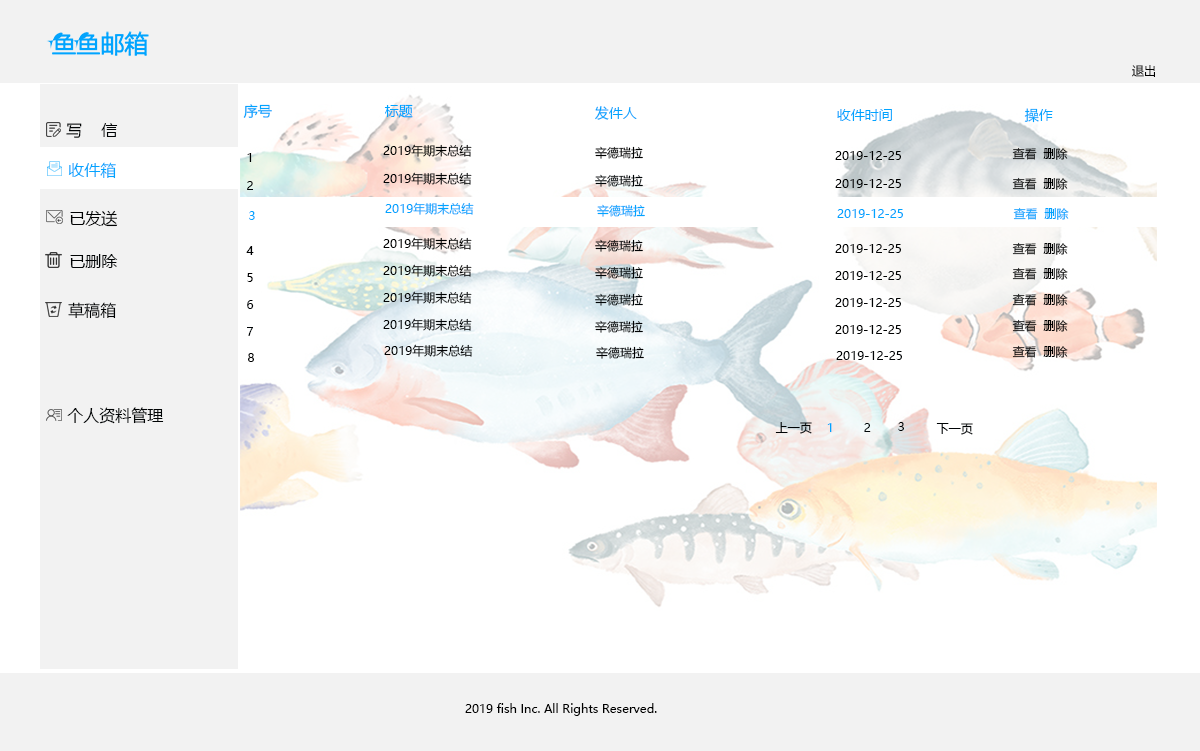
<style>
.page{position:relative;width:1200px;height:751px;background:#ffffff}
.page>*{position:absolute;margin:0}
.t1{font:12px "MicrosoftYaHei";color:#000000}
.t2{font:14px "MicrosoftYaHei";color:#00a4ff}
.t3{font:16px "MicrosoftYaHei";color:#000304}
.t4{font:12px "MicrosoftYaHei";color:#000101}
.t5{font:12px "MicrosoftYaHei";color:#000102}
.t6{font:16px "MicrosoftYaHei";color:#02a5ff}
.t7{font:12px "MicrosoftYaHei";color:#000203}
.t8{font:12px "MicrosoftYaHei";color:#000507}
.t9{font:12px "MicrosoftYaHei";color:#00a4ff}
.t10{font:16px "MicrosoftYaHei";color:#000102}
.t11{font:12px "MicrosoftYaHei";color:#000406}
.t12{font:16px "MicrosoftYaHei";color:#000203}
.t13{font:12px "MicrosoftYaHei";color:#000305}
.t14{font:12px "MicrosoftYaHei";color:#000304}
</style>
<div class="page">
<p class="t1" style="left:1132px;top:65px;width:23px;height:12px">退出</p>
<p class="t2" style="left:243px;top:104px;width:29px;height:14px">序号</p>
<p class="t2" style="left:384px;top:104px;width:29px;height:14px">标题</p>
<p class="t2" style="left:595px;top:106px;width:42px;height:14px">发件人</p>
<p class="t2" style="left:837px;top:109px;width:55px;height:12px">收件时间</p>
<p class="t2" style="left:1024px;top:108px;width:29px;height:15px">操作</p>
<p class="t3" style="left:66px;top:123px;width:52px;height:15px">写    信</p>
<p class="t4" style="left:383px;top:144px;width:89px;height:13px">2019年期末总结</p>
<p class="t4" style="left:595px;top:146px;width:48px;height:13px">辛德瑞拉</p>
<p class="t4" style="left:1012px;top:147px;width:56px;height:13px">查看  删除</p>
<p class="t5" style="left:247px;top:153px;width:5px;height:9px">1</p>
<p class="t4" style="left:835px;top:151px;width:66px;height:9px">2019-12-25</p>
<p class="t6" style="left:68px;top:162px;width:48px;height:17px">收件箱</p>
<p class="t7" style="left:383px;top:172px;width:89px;height:13px">2019年期末总结</p>
<p class="t8" style="left:595px;top:174px;width:48px;height:13px">辛德瑞拉</p>
<p class="t7" style="left:247px;top:181px;width:6px;height:9px">2</p>
<p class="t1" style="left:835px;top:179px;width:66px;height:9px">2019-12-25</p>
<p class="t4" style="left:1012px;top:177px;width:56px;height:13px">查看  删除</p>
<p class="t9" style="left:385px;top:202px;width:89px;height:13px">2019年期末总结</p>
<p class="t9" style="left:597px;top:204px;width:48px;height:13px">辛德瑞拉</p>
<p class="t9" style="left:837px;top:209px;width:66px;height:9px">2019-12-25</p>
<p class="t9" style="left:1013px;top:207px;width:56px;height:13px">查看  删除</p>
<p class="t10" style="left:70px;top:210px;width:48px;height:17px">已发送</p>
<p class="t9" style="left:249px;top:211px;width:6px;height:9px">3</p>
<p class="t5" style="left:246px;top:246px;width:8px;height:9px">4</p>
<p class="t4" style="left:383px;top:237px;width:89px;height:13px">2019年期末总结</p>
<p class="t7" style="left:595px;top:239px;width:48px;height:13px">辛德瑞拉</p>
<p class="t4" style="left:835px;top:244px;width:66px;height:9px">2019-12-25</p>
<p class="t4" style="left:1012px;top:242px;width:56px;height:13px">查看  删除</p>
<p class="t3" style="left:70px;top:254px;width:48px;height:14px">已删除</p>
<p class="t1" style="left:383px;top:264px;width:89px;height:13px">2019年期末总结</p>
<p class="t11" style="left:595px;top:266px;width:48px;height:13px">辛德瑞拉</p>
<p class="t4" style="left:1012px;top:267px;width:56px;height:13px">查看  删除</p>
<p class="t1" style="left:247px;top:273px;width:6px;height:9px">5</p>
<p class="t7" style="left:835px;top:271px;width:66px;height:9px">2019-12-25</p>
<p class="t7" style="left:383px;top:291px;width:89px;height:13px">2019年期末总结</p>
<p class="t8" style="left:595px;top:293px;width:48px;height:13px">辛德瑞拉</p>
<p class="t4" style="left:1012px;top:293px;width:56px;height:13px">查看  删除</p>
<p class="t12" style="left:68px;top:302px;width:48px;height:17px">草稿箱</p>
<p class="t13" style="left:247px;top:300px;width:7px;height:9px">6</p>
<p class="t7" style="left:835px;top:298px;width:66px;height:9px">2019-12-25</p>
<p class="t13" style="left:383px;top:318px;width:89px;height:13px">2019年期末总结</p>
<p class="t11" style="left:247px;top:327px;width:6px;height:9px">7</p>
<p class="t5" style="left:595px;top:320px;width:48px;height:13px">辛德瑞拉</p>
<p class="t4" style="left:835px;top:325px;width:66px;height:9px">2019-12-25</p>
<p class="t4" style="left:1012px;top:319px;width:56px;height:13px">查看  删除</p>
<p class="t4" style="left:248px;top:353px;width:6px;height:9px">8</p>
<p class="t5" style="left:384px;top:344px;width:89px;height:13px">2019年期末总结</p>
<p class="t5" style="left:596px;top:346px;width:48px;height:13px">辛德瑞拉</p>
<p class="t14" style="left:836px;top:351px;width:66px;height:9px">2019-12-25</p>
<p class="t4" style="left:1012px;top:345px;width:56px;height:13px">查看  删除</p>
<p class="t3" style="left:67px;top:407px;width:97px;height:17px">个人资料管理</p>
<p class="t14" style="left:775px;top:422px;width:37px;height:12px">上一页</p>
<p class="t9" style="left:827px;top:423px;width:5px;height:9px">1</p>
<p class="t8" style="left:864px;top:423px;width:7px;height:9px">2</p>
<p class="t14" style="left:898px;top:422px;width:6px;height:9px">3</p>
<p class="t13" style="left:936px;top:423px;width:37px;height:12px">下一页</p>
<p class="t1" style="left:465px;top:703px;width:192px;height:13px">2019 fish Inc. All Rights Reserved.</p>
</div>
